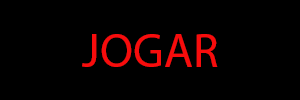
<style>
.page{position:relative;width:300px;height:100px;background:#000000}
.page>*{position:absolute;margin:0}
.t1{font:48px "MyriadHebrew-Regular";color:#f80c0c}
</style>
<div class="page">
<p class="t1" style="left:82px;top:34px;width:136px;height:33px">JOGAR</p>
</div>
